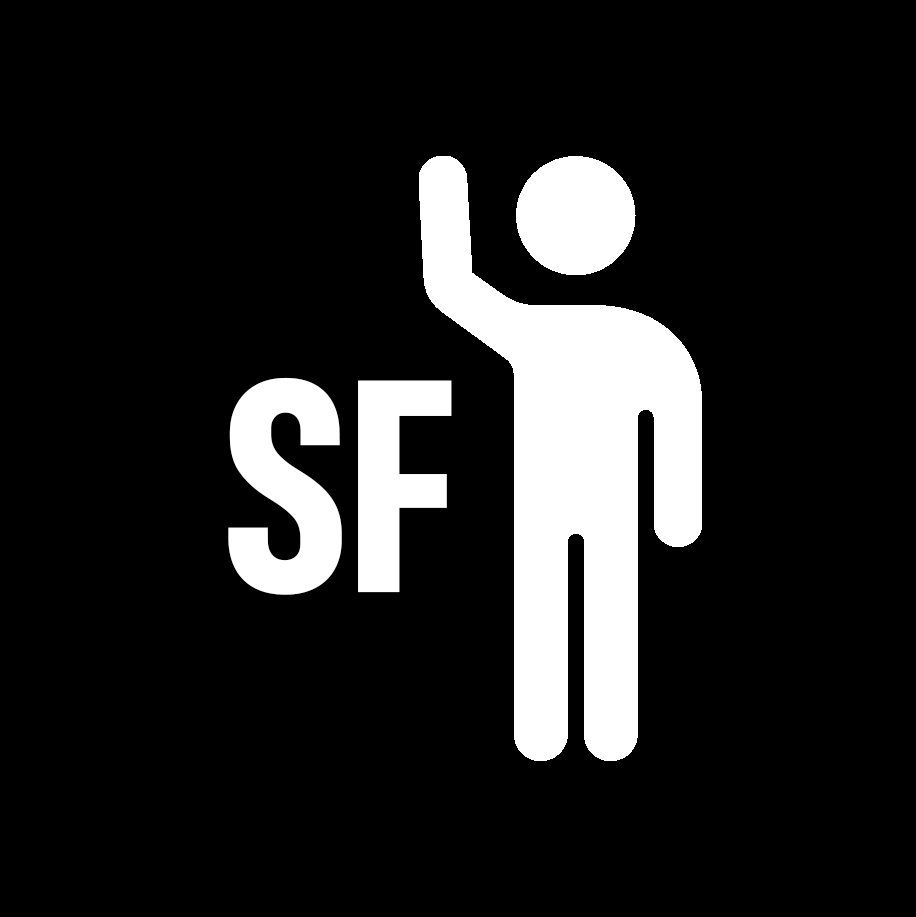
<style>
.page{position:relative;width:916px;height:917px;background:#000000}
.page>*{position:absolute;margin:0}
.t1{font:300px "SFPro-CompressedBold";color:#ffffff}
</style>
<div class="page">
<p class="t1" style="left:228px;top:377px;width:224px;height:218px">SF</p>
</div>
